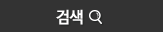
<style>
.page{position:relative;width:163px;height:32px;background:#333333}
.page>*{position:absolute;margin:0}
.t1{font:16px "RixJGoM";letter-spacing:-0.075em;color:#ffffff;scale:1.03 1}
</style>
<div class="page">
<p class="t1" style="left:56px;top:9px;width:27px;height:16px">검색</p>
</div>
